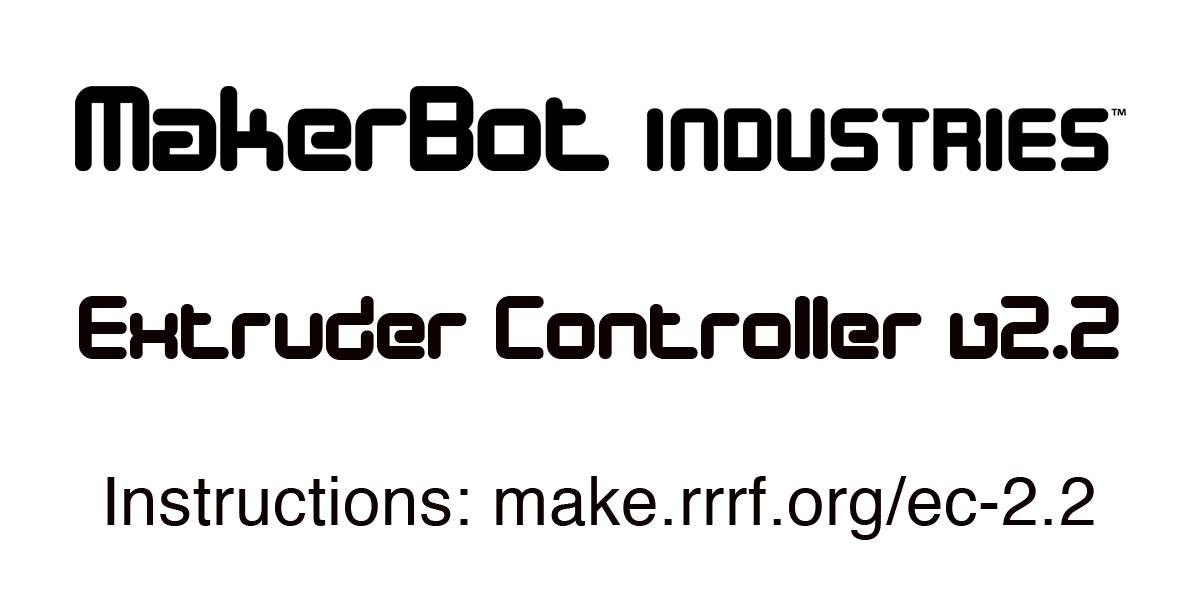
<style>
.page{position:relative;width:1200px;height:600px;background:#ffffff}
.page>*{position:absolute;margin:0}
.t1{font:92.5px "DesignerBlock";letter-spacing:0.01em;color:#0c0000}
.t2{font:67.4px "Helvetica";letter-spacing:0.01em;color:#0c0000}
</style>
<div class="page">
<p class="t1" style="left:79px;top:296px;width:1040px;height:64px">Extruder Controller v2.2</p>
<p class="t2" style="left:107px;top:476px;width:987px;height:64px">Instructions: make.rrrf.org/ec-2.2</p>
</div>
